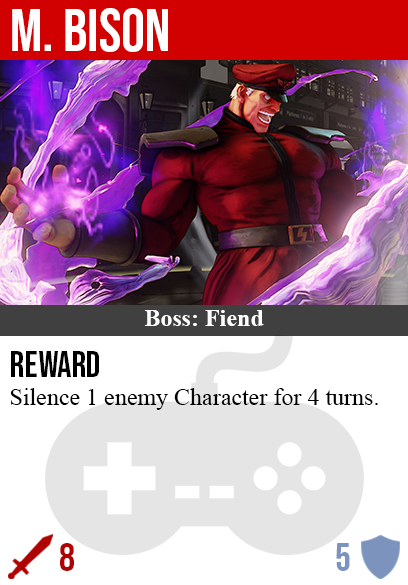
<style>
.page{position:relative;width:408px;height:585px;background:#ffffff}
.page>*{position:absolute;margin:0}
.t1{font:60px "BebasNeue-Regular";color:#ffffff}
.t2{font:24px "TimesNewRomanPS-BoldMT";color:#ffffff}
.t3{font:36px "BebasNeue-Regular";color:#000000}
.t4{font:24px "TimesNewRomanPSMT";color:#000000}
.t5{font:40px "BebasNeue-Regular";color:#af0202}
.t6{font:40px "BebasNeue-Regular";color:#7c94bd}
</style>
<div class="page">
<p class="t1" style="left:12px;top:8px;width:156px;height:44px">m. Bison</p>
<p class="t2" style="left:145px;top:310px;width:119px;height:16px">Boss: Fiend</p>
<p class="t3" style="left:11px;top:351px;width:88px;height:26px">reward</p>
<p class="t4" style="left:10px;top:388px;width:368px;height:22px">Silence 1 enemy Character for 4 turns.</p>
<p class="t5" style="left:60px;top:543px;width:14px;height:28px">8</p>
<p class="t6" style="left:336px;top:543px;width:14px;height:28px">5</p>
</div>
